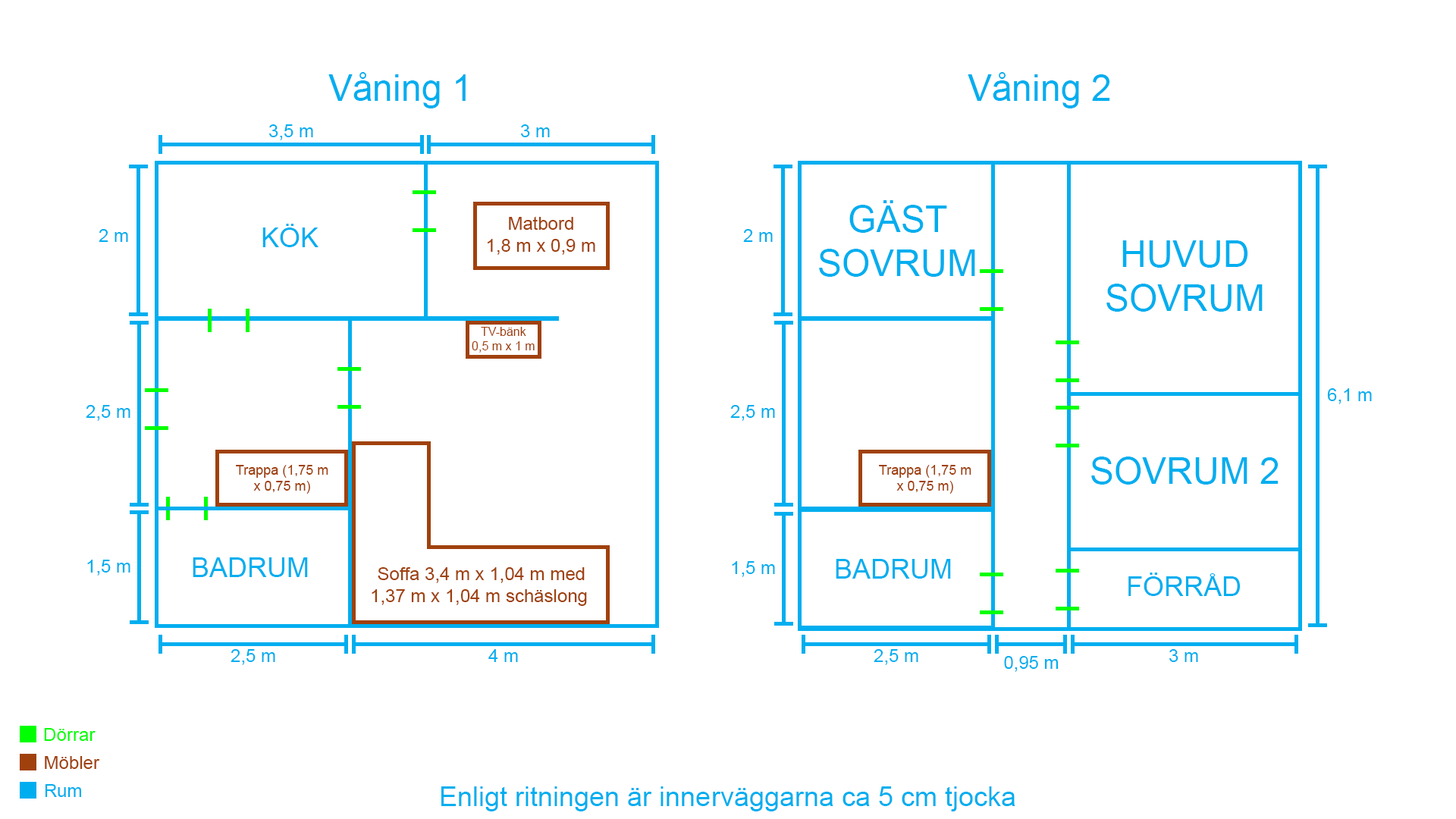
<style>
.page{position:relative;width:1456px;height:819px;background:#ffffff}
.page>*{position:absolute;margin:0}
.t1{font:36.4px "ArialMT";color:#00aeef}
.t2{font:18.2px "ArialMT";color:#00aeef}
.t3{font:18.2px "ArialMT";color:#a0410d}
.t4{font:27.3px "ArialMT";color:#00aeef}
.t5{font:12.1px "ArialMT";color:#a0410d}
.t6{font:13.6px "ArialMT";color:#a0410d}
.t7{font:18.2px "ArialMT";color:#00ff00}
</style>
<div class="page">
<p class="t1" style="left:328px;top:72px;width:138px;height:36px">Våning 1</p>
<p class="t1" style="left:968px;top:72px;width:142px;height:36px">Våning 2</p>
<p class="t2" style="left:269px;top:124px;width:44px;height:16px">3,5 m</p>
<p class="t2" style="left:521px;top:124px;width:29px;height:13px">3 m</p>
<p class="t1" style="left:819px;top:200px;width:156px;height:77px;text-align:center">GÄST<br>SOVRUM</p>
<p class="t3" style="left:488px;top:216px;width:107px;height:39px;text-align:center">Matbord<br>1,8 m x 0,9 m</p>
<p class="t2" style="left:99px;top:229px;width:29px;height:13px">2 m</p>
<p class="t4" style="left:262px;top:224px;width:56px;height:23px">KÖK</p>
<p class="t2" style="left:743px;top:229px;width:30px;height:13px">2 m</p>
<p class="t1" style="left:1106px;top:240px;width:157px;height:72px;text-align:center">HUVUD<br>SOVRUM</p>
<p class="t5" style="left:472px;top:327px;width:63px;height:26px;text-align:center">TV-bänk<br>0,5 m x 1 m</p>
<p class="t2" style="left:1327px;top:388px;width:45px;height:16px">6,1 m</p>
<p class="t2" style="left:86px;top:405px;width:44px;height:16px">2,5 m</p>
<p class="t2" style="left:730px;top:405px;width:45px;height:16px">2,5 m</p>
<p class="t1" style="left:1091px;top:457px;width:188px;height:28px">SOVRUM 2</p>
<p class="t6" style="left:236px;top:465px;width:92px;height:29px;text-align:center">Trappa (1,75 m<br>x 0,75 m)</p>
<p class="t6" style="left:879px;top:465px;width:92px;height:29px;text-align:center">Trappa (1,75 m<br>x 0,75 m)</p>
<p class="t4" style="left:193px;top:557px;width:115px;height:20px">BADRUM</p>
<p class="t2" style="left:87px;top:560px;width:43px;height:16px">1,5 m</p>
<p class="t3" style="left:372px;top:567px;width:215px;height:39px;text-align:center">Soffa 3,4 m x 1,04 m med<br>1,37 m x 1,04 m schäslong</p>
<p class="t2" style="left:732px;top:561px;width:43px;height:16px">1,5 m</p>
<p class="t4" style="left:836px;top:559px;width:115px;height:20px">BADRUM</p>
<p class="t4" style="left:1128px;top:573px;width:113px;height:23px">FÖRRÅD</p>
<p class="t2" style="left:231px;top:649px;width:44px;height:16px">2,5 m</p>
<p class="t2" style="left:488px;top:649px;width:30px;height:13px">4 m</p>
<p class="t2" style="left:874px;top:649px;width:44px;height:16px">2,5 m</p>
<p class="t2" style="left:1169px;top:649px;width:29px;height:13px">3 m</p>
<p class="t2" style="left:1004px;top:656px;width:55px;height:16px">0,95 m</p>
<p class="t7" style="left:44px;top:728px;width:52px;height:13px">Dörrar</p>
<p class="t3" style="left:45px;top:756px;width:55px;height:13px">Möbler</p>
<p class="t2" style="left:45px;top:784px;width:37px;height:13px">Rum</p>
<p class="t4" style="left:441px;top:786px;width:574px;height:25px">Enligt ritningen är innerväggarna ca 5 cm tjocka</p>
</div>
